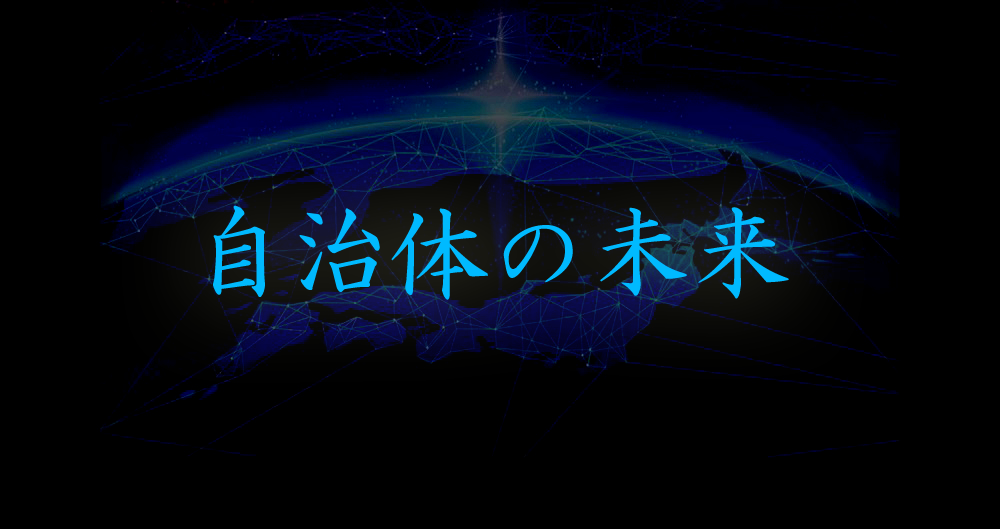
<style>
.page{position:relative;width:1000px;height:529px;background:#000000}
.page>*{position:absolute;margin:0}
.t1{font:100px "HGSeikaishotaiPRO";color:#00baff}
</style>
<div class="page">
<p class="t1" style="left:213px;top:205px;width:576px;height:95px">自治体の未来</p>
</div>
